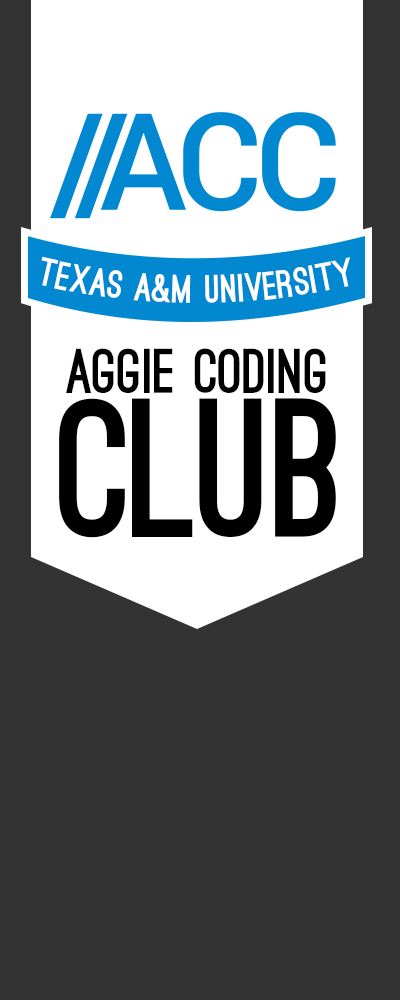
<style>
.page{position:relative;width:400px;height:1000px;background:#333333}
.page>*{position:absolute;margin:0}
.t1{font:37.5px "OstrichSans-Black";color:#ffffff}
.t2{font:60.1px "OstrichSans-Black";color:#000000}
.t3{font:187.9px "OstrichSans-Black";color:#000000}
</style>
<div class="page">
<p class="t1" style="left:41px;top:256px;width:309px;height:47px">texas a&amp;m university</p>
<p class="t2" style="left:66px;top:348px;width:260px;height:45px">AGGIE CODING</p>
<p class="t3" style="left:59px;top:398px;width:277px;height:140px">CLUB</p>
</div>
